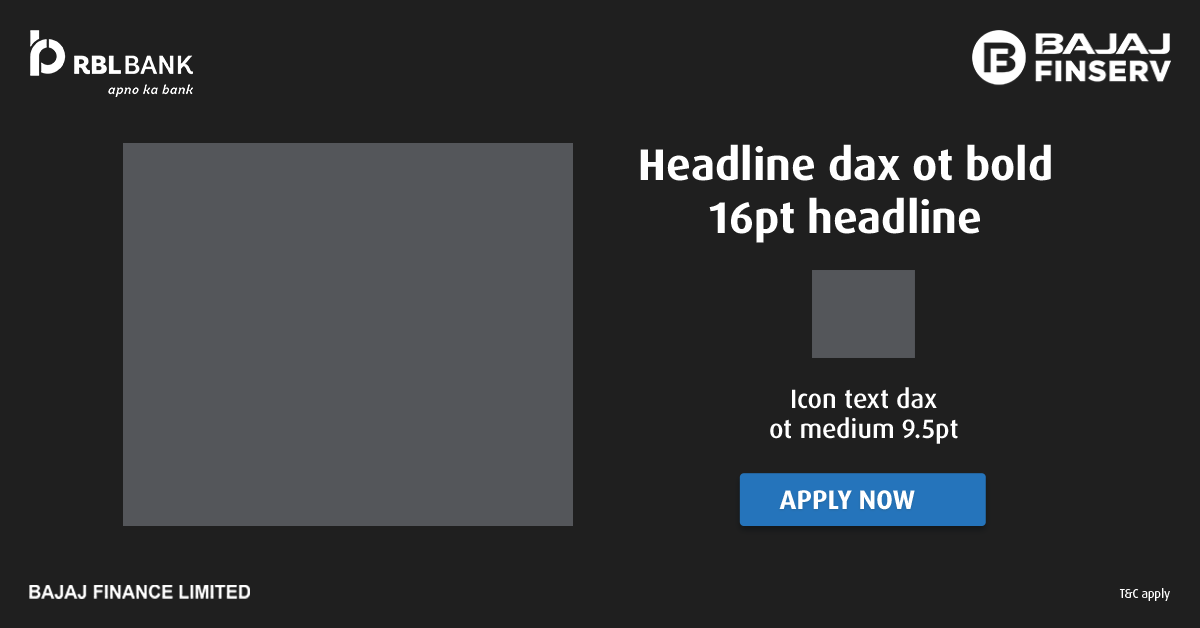
<style>
.page{position:relative;width:1200px;height:628px;background:#1f1f1f}
.page>*{position:absolute;margin:0}
.t1{font:44.5px "DaxOT-Bold";color:#ffffff}
.t2{font:26.4px/30.6px "DaxOT-Medium";color:#ffffff}
.t3{font:27px "DaxOT-Bold";color:#ffffff;text-transform:uppercase}
.t4{font:12.5px "DaxOT";color:#ffffff}
</style>
<div class="page">
<p class="t1" style="left:640px;top:144px;width:411px;height:99px;text-align:center">Headline dax ot bold<br>16pt headline</p>
<p class="t2" style="left:770px;top:387px;width:188px;height:57px;text-align:center">Icon text dax<br>ot medium 9.5pt</p>
<p class="t3" style="left:779px;top:490px;width:136px;height:20px">Apply Now</p>
<p class="t4" style="left:1119px;top:588px;width:51px;height:13px">T&amp;C apply</p>
</div>
